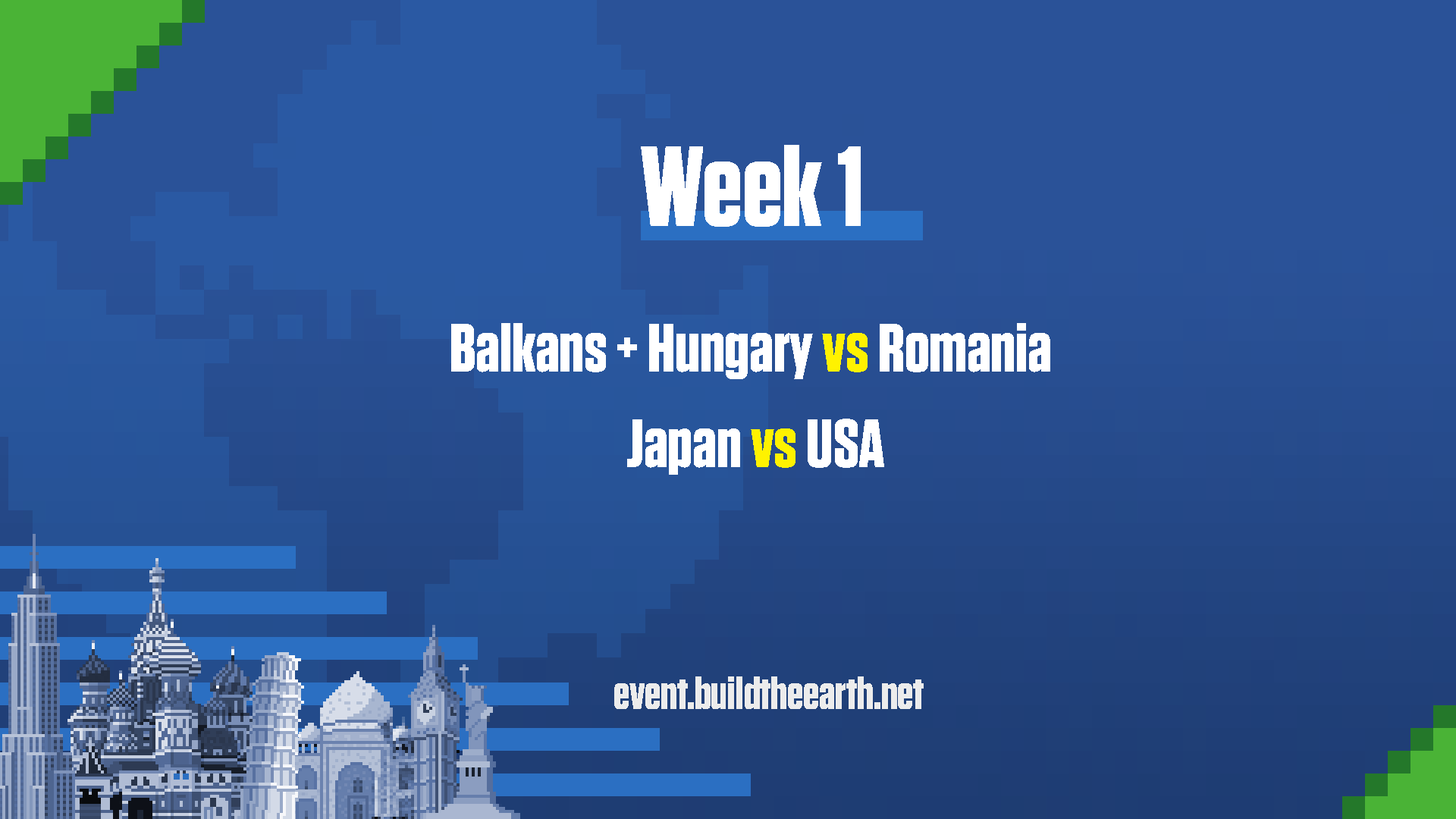
<style>
.page{position:relative;width:1456px;height:819px}
.page>*{position:absolute;margin:0}
.t1{font:113.7px "Tungsten-Bold";color:#ffffff}
.t2{font:68.2px "Tungsten-Bold";color:#ffffff}
.t3{font:68.2px "Tungsten-Bold";color:#fff200}
.t4{font:45.5px "Tungsten-Bold";color:#ececec}
</style>
<div class="page">
<p class="t1" style="left:641px;top:145px;width:220px;height:82px">Week 1</p>
<p class="t2" style="left:451px;top:323px;width:599px;height:56px">Balkans + Hungary <span class="t3">vs </span>Romania</p>
<p class="t2" style="left:627px;top:419px;width:257px;height:56px">Japan <span class="t3">vs </span>USA</p>
<p class="t4" style="left:614px;top:676px;width:310px;height:33px">event.buildtheearth.net</p>
</div>
